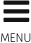
<style>
.page{position:relative;width:31px;height:43px;background:#ffffff}
.page>*{position:absolute;margin:0}
.t1{font:12px "FiraSans-Hair";color:#141414}
</style>
<div class="page">
<p class="t1" style="left:0px;top:33px;width:31px;height:9px">MENU</p>
</div>
